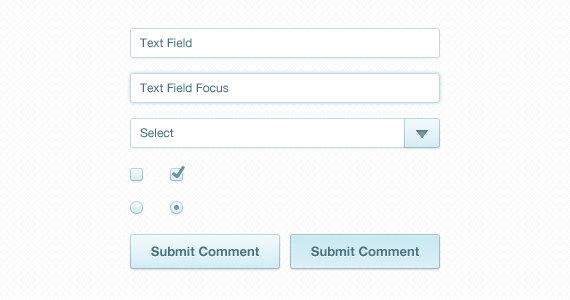
<style>
.page{position:relative;width:570px;height:300px;background:#ffffff}
.page>*{position:absolute;margin:0}
.t1{font:12px "HelveticaNeue";color:#437182}
.t2{font:13px "HelveticaNeue-Bold";color:#437182}
</style>
<div class="page">
<p class="t1" style="left:140px;top:38px;width:52px;height:10px">Text Field</p>
<p class="t1" style="left:140px;top:83px;width:89px;height:10px">Text Field Focus</p>
<p class="t1" style="left:140px;top:128px;width:34px;height:10px">Select</p>
<p class="t2" style="left:151px;top:246px;width:108px;height:11px">Submit Comment</p>
<p class="t2" style="left:311px;top:246px;width:108px;height:11px">Submit Comment</p>
</div>
